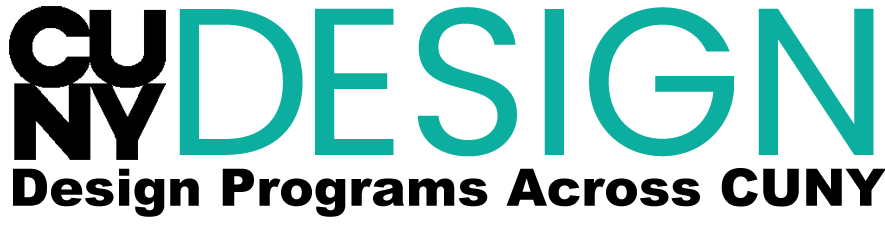
<style>
.page{position:relative;width:885px;height:225px;background:#ffffff}
.page>*{position:absolute;margin:0}
.t1{font:51.8px "Arial-Black";color:#000000}
</style>
<div class="page">
<p class="t1" style="left:13px;top:168px;width:873px;height:49px">Design Programs Across CUNY</p>
</div>
